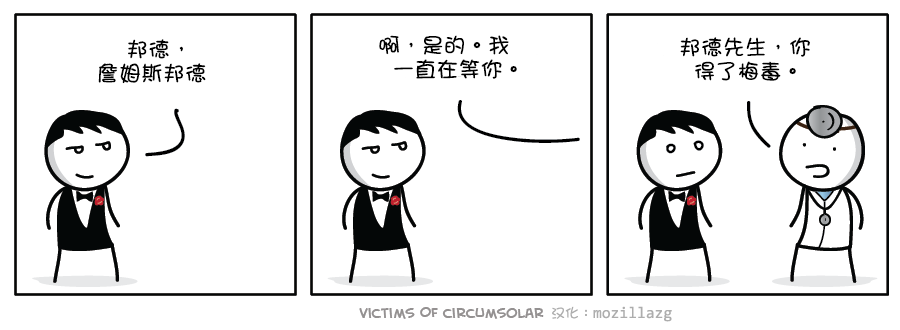
<style>
.page{position:relative;width:900px;height:330px;background:#ffffff}
.page>*{position:absolute;margin:0}
.t1{font:22px/24px "DFGirl";color:#000000}
</style>
<div class="page">
<p class="t1" style="left:98px;top:39px;width:108px;height:45px">邦德，<br>詹姆斯邦德</p>
<p class="t1" style="left:379px;top:35px;width:138px;height:44px">啊，是的。我<br>  一直在等你。</p>
<p class="t1" style="left:680px;top:37px;width:130px;height:44px">邦德先生，你<br>  得了梅毒。</p>
</div>
